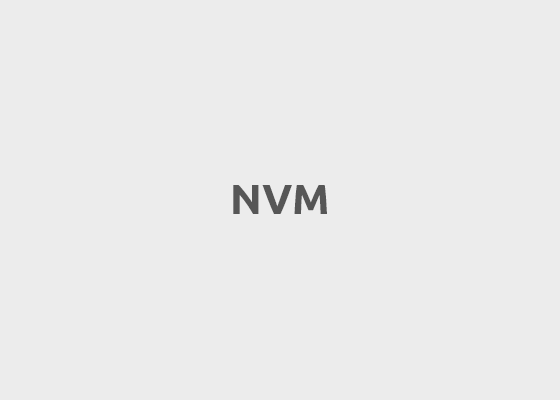
<style>
.page{position:relative;width:560px;height:400px;background:#ececec}
.page>*{position:absolute;margin:0}
.t1{font:42px "Ubuntu-Bold";color:#565656}
</style>
<div class="page">
<p class="t1" style="left:233px;top:185px;width:94px;height:29px">NVM</p>
</div>
